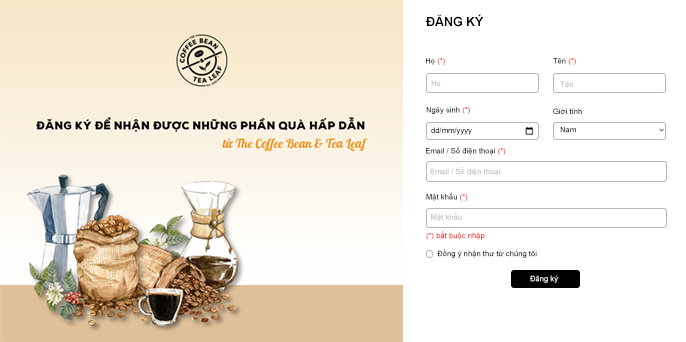
<style>
.page{position:relative;width:686px;height:342px;background:#ffffff}
.page>*{position:absolute;margin:0}
.t1{font:12.5px "Arial-BoldMT";color:#000000}
.t2{font:7.7px "ArialMT"}
.t3{font:7.7px "ArialMT";color:#bbbbbb}
.t4{font:7.7px "ArialMT";color:#000000}
.t5{font:7.7px "ArialMT";color:#ffffff}
</style>
<div class="page">
<p class="t1" style="left:426px;top:14px;width:58px;height:13px">ĐĂNG KÝ</p>
<p class="t2" style="left:426px;top:58px;width:19px;height:7px">Họ (*)</p>
<p class="t2" style="left:553px;top:58px;width:23px;height:7px">Tên (*)</p>
<p class="t3" style="left:431px;top:80px;width:10px;height:7px">Họ</p>
<p class="t3" style="left:560px;top:81px;width:13px;height:6px">Tên</p>
<p class="t2" style="left:426px;top:107px;width:44px;height:7px">Ngày sinh (*)</p>
<p class="t2" style="left:553px;top:108px;width:29px;height:6px">Giới tính</p>
<p class="t2" style="left:560px;top:126px;width:16px;height:7px">Nam</p>
<p class="t2" style="left:431px;top:127px;width:41px;height:8px">dd/mm/yyyy</p>
<p class="t2" style="left:426px;top:146px;width:80px;height:9px">Email / Số điện thoại (*)</p>
<p class="t3" style="left:430px;top:167px;width:70px;height:9px">Email / Số điện thoại</p>
<p class="t2" style="left:426px;top:192px;width:42px;height:9px">Mật khẩu (*)</p>
<p class="t3" style="left:431px;top:212px;width:31px;height:9px">Mật khẩu</p>
<p class="t2" style="left:426px;top:231px;width:59px;height:9px">(*) bắt buộc nhập</p>
<p class="t4" style="left:437px;top:249px;width:100px;height:9px">Đồng ý nhận thư từ chúng tôi</p>
<p class="t5" style="left:530px;top:275px;width:28px;height:8px">Đăng ký</p>
</div>
